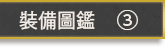
<style>
.page{position:relative;width:165px;height:47px;background:#3e3e3e}
.page>*{position:absolute;margin:0}
.t1{font:20px "GothicMB101Pro-Regular";color:#f2ebe5;scale:0.95 1}
</style>
<div class="page">
<p class="t1" style="left:19px;top:10px;width:76px;height:20px">裝備圖鑑</p>
</div>
